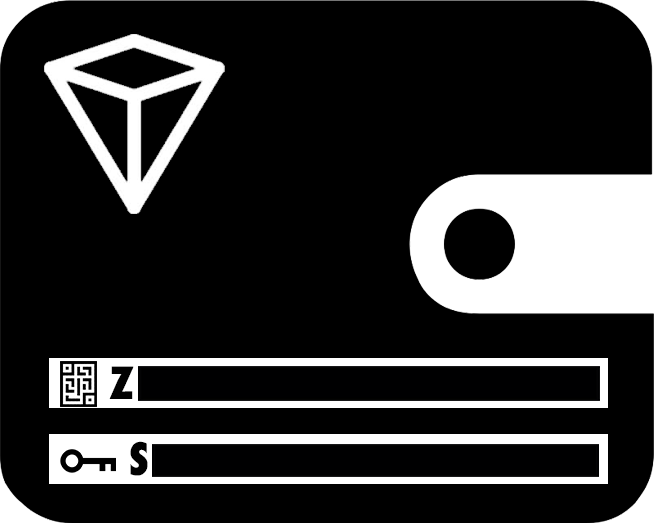
<style>
.page{position:relative;width:654px;height:523px;background:#000000}
.page>*{position:absolute;margin:0}
.t1{font:43.2px "Futura-CondensedExtraBold";color:#010101}
</style>
<div class="page">
<p class="t1" style="left:109px;top:366px;width:25px;height:33px">Z</p>
<p class="t1" style="left:130px;top:441px;width:18px;height:35px">S</p>
</div>
